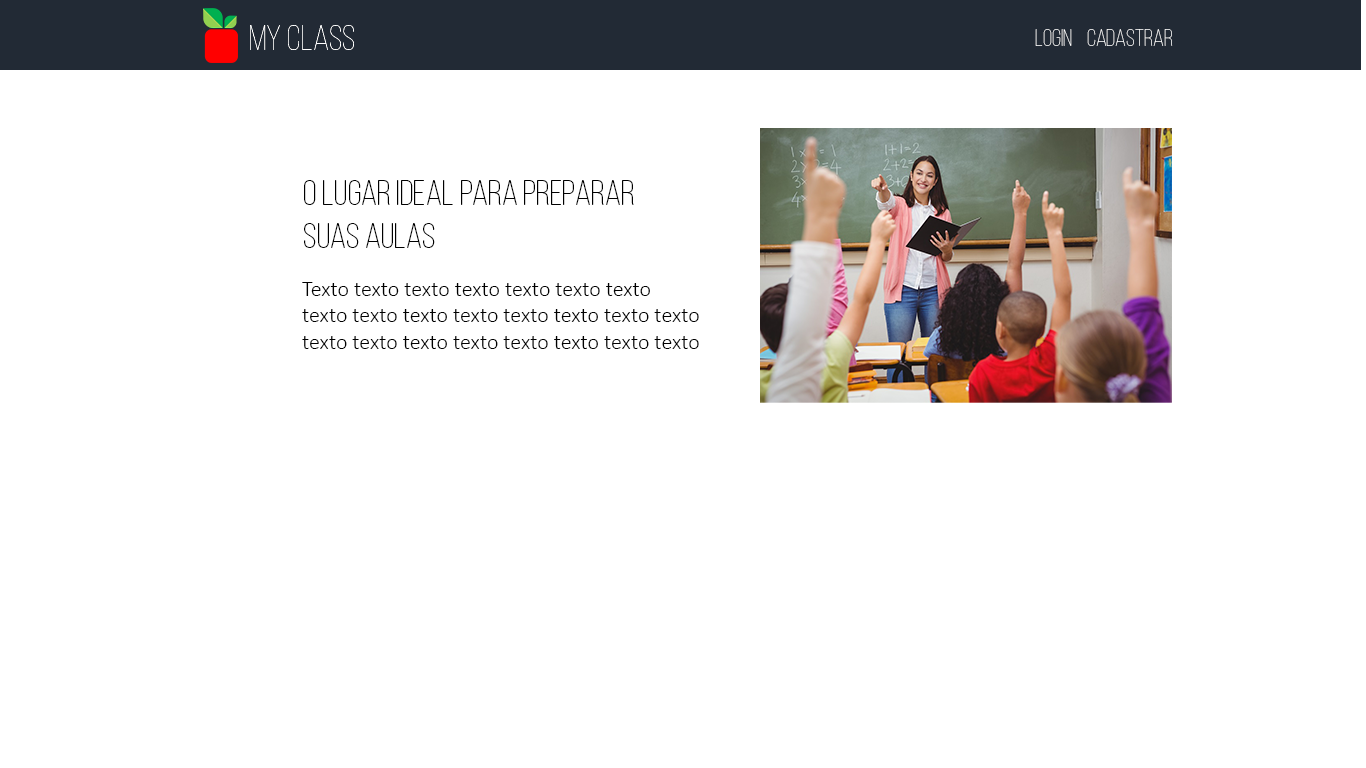
<style>
.page{position:relative;width:1366px;height:768px;background:#ffffff}
.page>*{position:absolute;margin:0}
.t1{font:36px "BebasNeue-Thin";color:#ffffff}
.t2{font:24px "BebasNeue-Thin";color:#ffffff}
.t3{font:36px "BebasNeueLight";color:#000000}
.t4{font:22px "Calibri-Light";color:#000000}
</style>
<div class="page">
<p class="t1" style="left:250px;top:25px;width:104px;height:25px">MY CLASS</p>
<p class="t2" style="left:1035px;top:29px;width:37px;height:17px">Login</p>
<p class="t2" style="left:1087px;top:29px;width:86px;height:17px">cadastrar</p>
<p class="t3" style="left:304px;top:180px;width:330px;height:68px">O lugar ideal para preparar<br>suas aulas</p>
<p class="t4" style="left:302px;top:282px;width:397px;height:67px">Texto texto texto texto texto texto texto<br>texto texto texto texto texto texto texto texto<br>texto texto texto texto texto texto texto texto</p>
</div>
